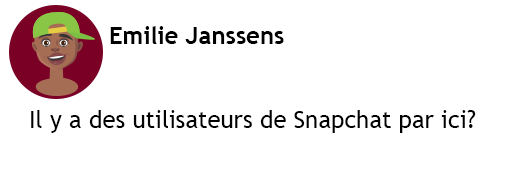
<style>
.page{position:relative;width:512px;height:188px;background:#ffffff}
.page>*{position:absolute;margin:0}
.t1{font:24px "TrebuchetMS-Bold";color:#000000}
.t2{font:24px "TrebuchetMS";color:#000000}
</style>
<div class="page">
<p class="t1" style="left:110px;top:26px;width:174px;height:18px">Emilie Janssens</p>
<p class="t2" style="left:31px;top:110px;width:445px;height:23px">Il y a des utilisateurs de Snapchat par ici?</p>
</div>
